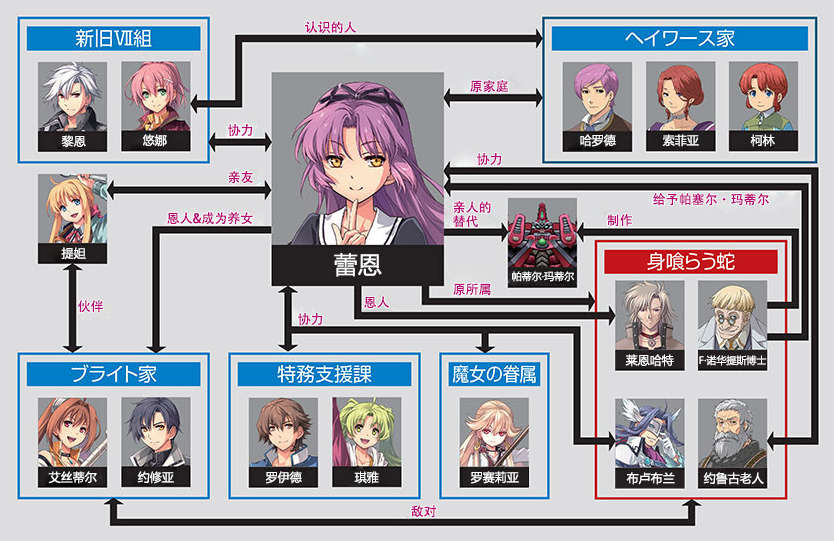
<style>
.page{position:relative;width:834px;height:541px;background:#dddddf}
.page>*{position:absolute;margin:0}
.t1{font:13px "AdobeHeitiStd-Regular";color:#b70773}
.t2{font:12px "MicrosoftYaHei";color:#ffffff}
.t3{font:13px/14px "AdobeHeitiStd-Regular";color:#b70773}
.t4{font:24px "MicrosoftYaHei";color:#ffffff}
.t5{font:10px "MicrosoftYaHei";color:#ffffff}
</style>
<div class="page">
<p class="t1" style="left:305px;top:21px;width:52px;height:13px">认识的人</p>
<p class="t1" style="left:470px;top:80px;width:38px;height:13px">原家庭</p>
<p class="t1" style="left:228px;top:124px;width:25px;height:13px">协力</p>
<p class="t2" style="left:61px;top:135px;width:25px;height:13px">黎恩</p>
<p class="t2" style="left:142px;top:134px;width:25px;height:13px">悠娜</p>
<p class="t2" style="left:580px;top:134px;width:36px;height:13px">哈罗德</p>
<p class="t2" style="left:662px;top:134px;width:37px;height:13px">索菲亚</p>
<p class="t2" style="left:750px;top:134px;width:25px;height:13px">柯林</p>
<p class="t1" style="left:477px;top:153px;width:25px;height:13px">协力</p>
<p class="t1" style="left:228px;top:171px;width:25px;height:13px">亲友</p>
<p class="t1" style="left:653px;top:193px;width:116px;height:13px">给予帕塞尔・玛蒂尔</p>
<p class="t3" style="left:452px;top:201px;width:39px;height:27px">亲人的<br>替代</p>
<p class="t1" style="left:167px;top:212px;width:86px;height:13px">恩人&amp;成为养女</p>
<p class="t1" style="left:607px;top:214px;width:25px;height:13px">制作</p>
<p class="t2" style="left:61px;top:247px;width:25px;height:13px">提妲</p>
<p class="t4" style="left:334px;top:253px;width:48px;height:24px">蕾恩</p>
<p class="t5" style="left:512px;top:271px;width:62px;height:11px">帕蒂尔·玛蒂尔</p>
<p class="t1" style="left:453px;top:283px;width:38px;height:13px">原所属</p>
<p class="t1" style="left:78px;top:300px;width:25px;height:13px">伙伴</p>
<p class="t1" style="left:364px;top:296px;width:26px;height:12px">恩人</p>
<p class="t1" style="left:298px;top:313px;width:25px;height:13px">协力</p>
<p class="t2" style="left:625px;top:354px;width:49px;height:13px">莱恩哈特</p>
<p class="t5" style="left:699px;top:355px;width:68px;height:11px">F·诺华提斯博士</p>
<p class="t2" style="left:48px;top:471px;width:49px;height:13px">艾丝蒂尔</p>
<p class="t2" style="left:137px;top:471px;width:37px;height:13px">约修亚</p>
<p class="t2" style="left:265px;top:471px;width:37px;height:13px">罗伊德</p>
<p class="t2" style="left:354px;top:471px;width:25px;height:13px">琪雅</p>
<p class="t2" style="left:470px;top:471px;width:49px;height:13px">罗赛莉亚</p>
<p class="t2" style="left:626px;top:472px;width:49px;height:13px">布卢布兰</p>
<p class="t2" style="left:703px;top:472px;width:61px;height:13px">约鲁古老人</p>
<p class="t1" style="left:411px;top:505px;width:26px;height:13px">敌对</p>
</div>
